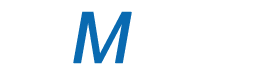
<style>
.page{position:relative;width:272px;height:72px;background:#ffffff}
.page>*{position:absolute;margin:0}
.t1{font:70.1px "ArialMT";letter-spacing:-0.1em;color:#096ab1;font-weight:bold;font-style:italic}
</style>
<div class="page">
<p class="t1" style="left:73px;top:11px;width:59px;height:53px">M</p>
</div>
